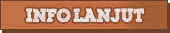
<style>
.page{position:relative;width:170px;height:33px}
.page>*{position:absolute;margin:0}
.t1{font:18px "ScribbleBoxDEMO";color:#f8f3f1}
</style>
<div class="page">
<p class="t1" style="left:26px;top:8px;width:119px;height:15px">Info Lanjut</p>
</div>
